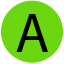
<style>
.page{position:relative;width:64px;height:64px;background:#6bd610}
.page>*{position:absolute;margin:0}
.t1{font:56px "MyriadPro-Regular";color:#000000}
</style>
<div class="page">
<p class="t1" style="left:16px;top:14px;width:32px;height:38px">A</p>
</div>
